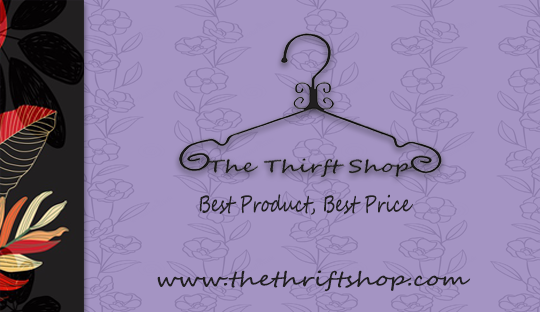
<style>
.page{position:relative;width:540px;height:312px;background:#a494c3}
.page>*{position:absolute;margin:0}
.t1{font:22.5px "SegoeScript";color:#211f20;scale:0.74 1}
.t2{font:20.2px "SegoeScript";color:#211f20;scale:1.24 1}
</style>
<div class="page">
<p class="t1" style="left:199px;top:194px;width:214px;height:21px">Best Product, Best Price</p>
<p class="t2" style="left:157px;top:270px;width:314px;height:22px">www.thethriftshop.com</p>
</div>
